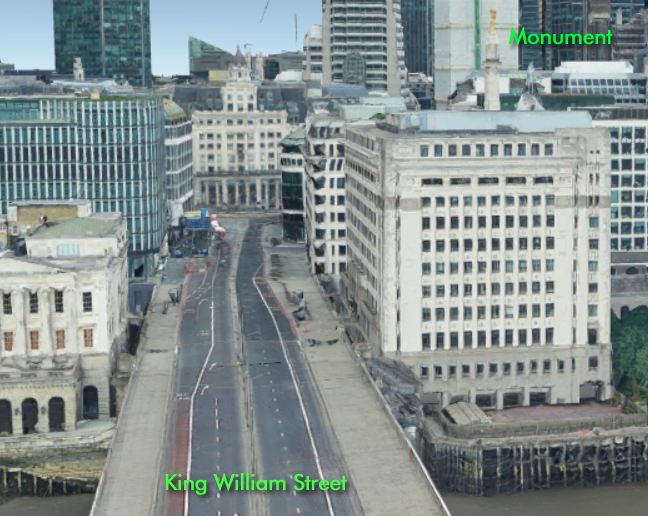
<style>
.page{position:relative;width:648px;height:516px}
.page>*{position:absolute;margin:0}
.t1{font:22px "FuturaBT-Book";letter-spacing:-0.025em;color:#00ff36;font-weight:bold}
.t2{font:22px "FuturaBT-Book";letter-spacing:-0.025em;color:#44ff44;font-weight:bold}
</style>
<div class="page">
<p class="t1" style="left:508px;top:27px;width:105px;height:18px">Monument</p>
<p class="t2" style="left:165px;top:473px;width:182px;height:22px">King William Street</p>
</div>
